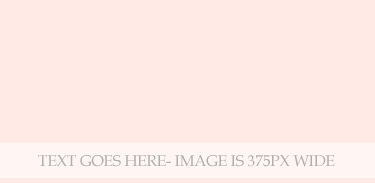
<style>
.page{position:relative;width:375px;height:183px;background:#ffeae5}
.page>*{position:absolute;margin:0}
.t1{font:15.5px "BookAntiqua";letter-spacing:-0.01em;color:#afaeae}
</style>
<div class="page">
<p class="t1" style="left:38px;top:155px;width:297px;height:12px">TEXT GOES HERE- IMAGE IS 375PX WIDE</p>
</div>
